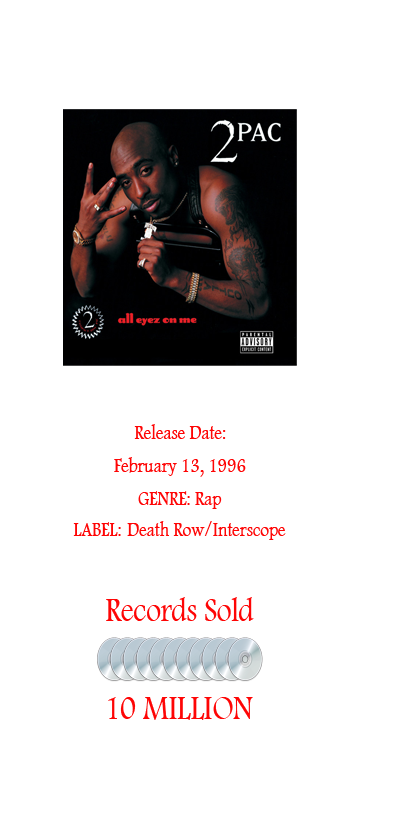
<style>
.page{position:relative;width:395px;height:830px;background:#ffffff}
.page>*{position:absolute;margin:0}
.t1{font:21.2px "FootlightMTLight";color:#fe0505;scale:0.81 1}
.t2{font:35.3px "FootlightMTLight";color:#fe0505;scale:0.81 1}
</style>
<div class="page">
<p class="t1" style="left:134px;top:424px;width:92px;height:15px">Release Date:</p>
<p class="t1" style="left:114px;top:457px;width:132px;height:20px">February 13, 1996</p>
<p class="t1" style="left:138px;top:491px;width:84px;height:18px">GENRE: Rap</p>
<p class="t1" style="left:73px;top:521px;width:213px;height:19px">LABEL:  Death Row/Interscope</p>
<p class="t2" style="left:106px;top:597px;width:148px;height:24px">Records Sold</p>
<p class="t2" style="left:108px;top:697px;width:145px;height:23px">10 MILLION</p>
</div>
